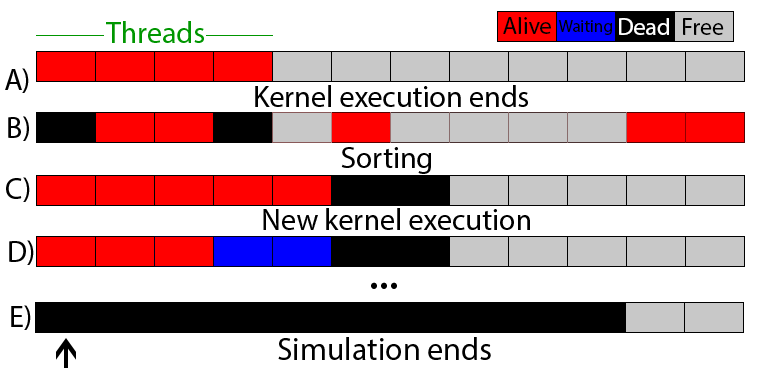
<style>
.page{position:relative;width:760px;height:370px;background:#ffffff}
.page>*{position:absolute;margin:0}
.t1{font:24px "MyriadPro-Regular";color:#000000}
.t2{font:30px "MyriadPro-Regular";color:#009600}
.t3{font:17px "MyriadPro-Regular";color:#000000}
.t4{font:24px "MyriadPro-Regular";color:#ffffff}
.t5{font:30px "MyriadPro-Regular";color:#000000}
.t6{font:50px "MyriadPro-Regular";color:#000000}
.t7{font:32px "MyriadPro-Regular";color:#000000}
</style>
<div class="page">
<p class="t1" style="left:503px;top:17px;width:48px;height:17px">Alive</p>
<p class="t2" style="left:106px;top:21px;width:98px;height:22px">Threads</p>
<p class="t3" style="left:558px;top:20px;width:54px;height:15px">Waiting</p>
<p class="t4" style="left:619px;top:18px;width:50px;height:17px">Dead</p>
<p class="t1" style="left:683px;top:18px;width:41px;height:17px">Free</p>
<p class="t5" style="left:5px;top:68px;width:24px;height:25px">A)</p>
<p class="t5" style="left:255px;top:85px;width:273px;height:22px">Kernel execution ends</p>
<p class="t5" style="left:8px;top:116px;width:21px;height:25px">B)</p>
<p class="t5" style="left:341px;top:147px;width:90px;height:27px">Sorting</p>
<p class="t5" style="left:6px;top:177px;width:24px;height:25px">C)</p>
<p class="t5" style="left:263px;top:208px;width:267px;height:22px">New kernel execution</p>
<p class="t5" style="left:9px;top:240px;width:25px;height:25px">D)</p>
<p class="t6" style="left:371px;top:282px;width:26px;height:7px">...</p>
<p class="t5" style="left:11px;top:305px;width:20px;height:25px">E)</p>
<p class="t7" style="left:278px;top:337px;width:213px;height:23px">Simulation ends</p>
</div>
